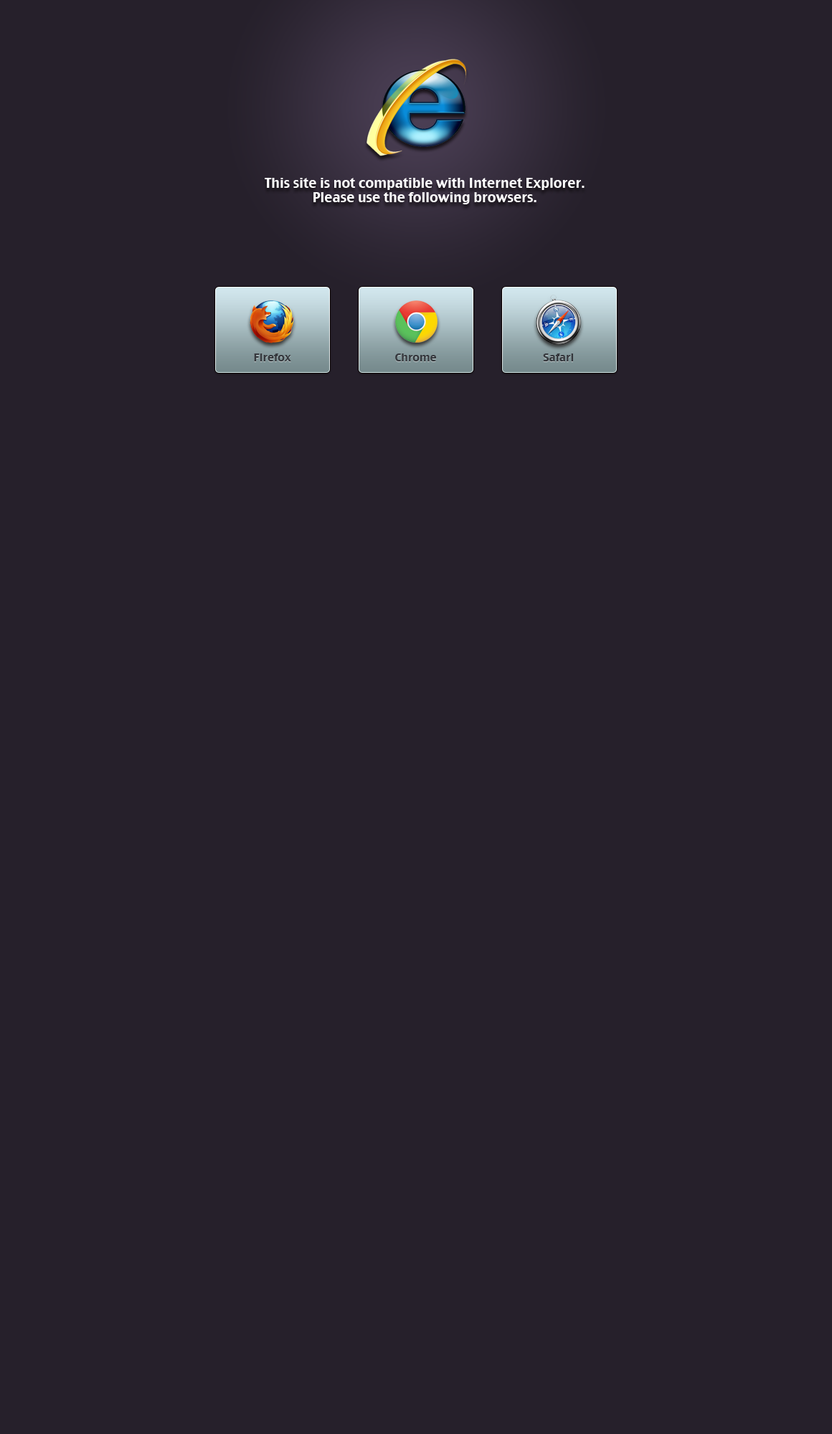
<style>
.page{position:relative;width:832px;height:1434px;background:#26202b}
.page>*{position:absolute;margin:0}
.t1{font:13.2px/14.3px "CharcoalCY";color:#ffffff}
.t2{font:10.8px "CharcoalCY";color:#35383d}
</style>
<div class="page">
<p class="t1" style="left:265px;top:178px;width:319px;height:26px;text-align:center">This site is not compatible with Internet Explorer.<br>Please use the following browsers.</p>
<p class="t2" style="left:254px;top:353px;width:37px;height:8px">Firefox</p>
<p class="t2" style="left:395px;top:353px;width:41px;height:8px">Chrome</p>
<p class="t2" style="left:543px;top:353px;width:30px;height:8px">Safari</p>
</div>
